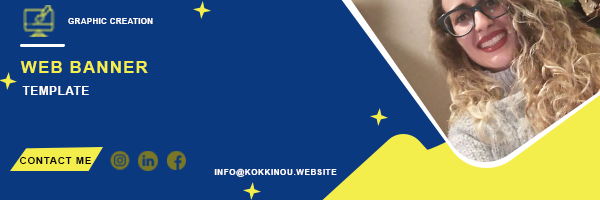
<style>
.page{position:relative;width:600px;height:200px;background:#0a3980}
.page>*{position:absolute;margin:0}
.t1{font:7.9px "Arial-BoldMT";letter-spacing:0.05em;color:#ffffff;text-transform:uppercase}
.t2{font:17.3px "Arial-BoldMT";letter-spacing:0.05em;color:#f4ee4d;text-transform:uppercase}
.t3{font:11.8px "Arial-BoldMT";letter-spacing:0.05em;color:#ffffff;text-transform:uppercase}
.t4{font:10.2px "Arial-BoldMT";letter-spacing:0.05em;color:#080808;text-transform:uppercase}
.t5{font:8.3px "Arial-BoldMT";letter-spacing:0.05em;color:#ffffff;text-transform:uppercase}
.t6{font:8.3px "Arial-BoldMT";letter-spacing:0.05em;color:#f9f6f6;text-transform:uppercase}
</style>
<div class="page">
<p class="t1" style="left:68px;top:18px;width:85px;height:6px">Graphic creation</p>
<p class="t2" style="left:20px;top:61px;width:128px;height:12px">web banner</p>
<p class="t3" style="left:22px;top:86px;width:67px;height:9px">TEMPLATE</p>
<p class="t4" style="left:19px;top:157px;width:72px;height:7px">Contact me</p>
<p class="t5" style="left:214px;top:168px;width:123px;height:9px">info@kokkinou.<span class="t6">website</span></p>
</div>
